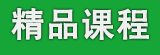
<style>
.page{position:relative;width:160px;height:55px;background:#16a637}
.page>*{position:absolute;margin:0}
.t1{font:34px "AdobeHeitiStd-Regular";letter-spacing:0.01em;color:#efefef;font-weight:bold}
</style>
<div class="page">
<p class="t1" style="left:11px;top:8px;width:138px;height:33px">精品课程</p>
</div>
